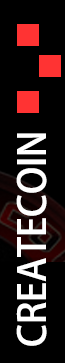
<style>
.page{position:relative;width:65px;height:363px;background:#000000}
.page>*{position:absolute;margin:0}
.t1{font:37.5px "AdobeHeitiStd-Regular";color:#ffffff;text-transform:uppercase}
</style>
<div class="page">
<p class="t1" style="left:16px;top:133px;width:31px;height:213px;rotate:-90deg">CreateCoin</p>
</div>
